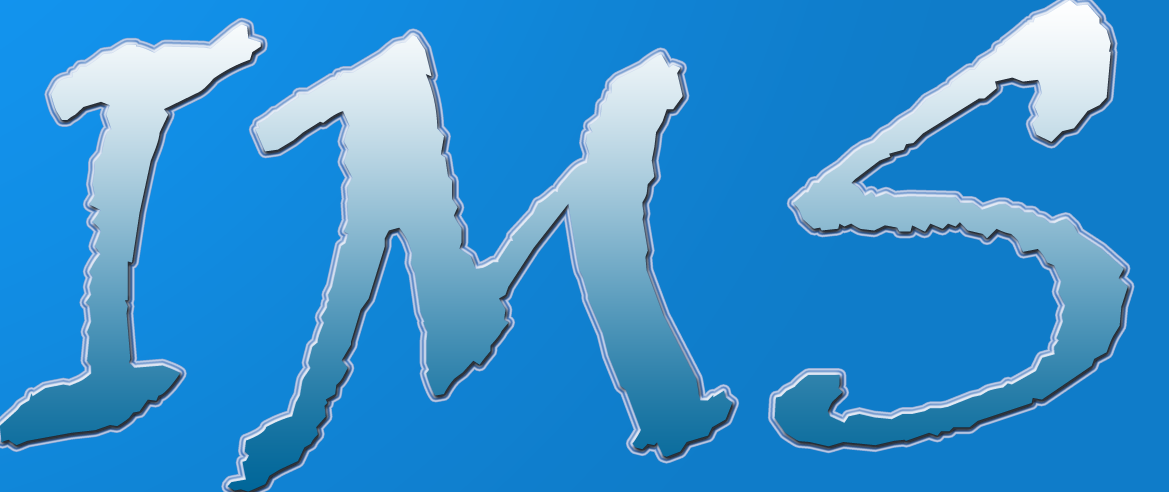
<style>
.page{position:relative;width:1169px;height:492px;background:#0f7cc9}
.page>*{position:absolute;margin:0}
.t1{font:591.5px "VinerHandITC"}
</style>
<div class="page">
<p class="t1" style="left:0px;top:0px;width:1128px;height:492px">IMS</p>
</div>
